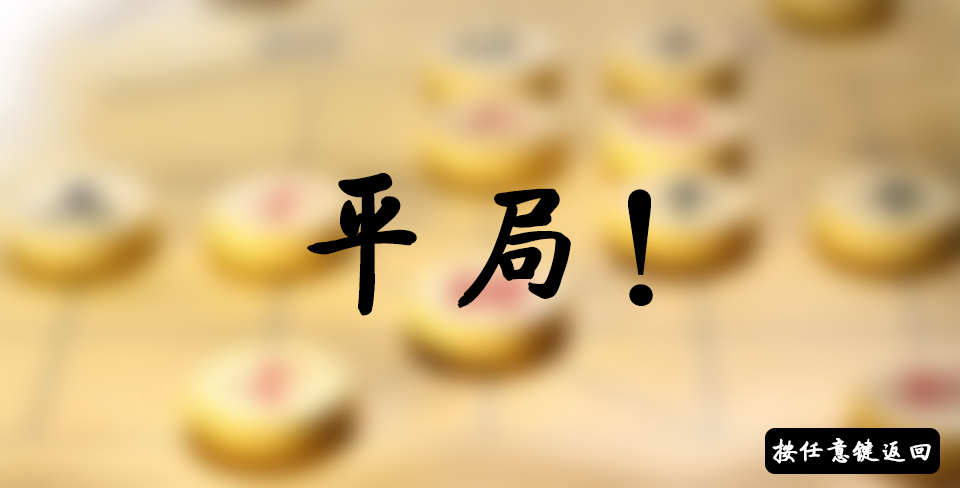
<style>
.page{position:relative;width:960px;height:488px}
.page>*{position:absolute;margin:0}
.t1{font:150px "FZQTJW--GB1-0";color:#000000;font-weight:bold}
.t2{font:26.5px "FZQTJW--GB1-0";color:#ffffff;font-weight:bold}
</style>
<div class="page">
<p class="t1" style="left:307px;top:173px;width:346px;height:143px">平局！</p>
<p class="t2" style="left:772px;top:438px;width:159px;height:26px">按任意键返回</p>
</div>
